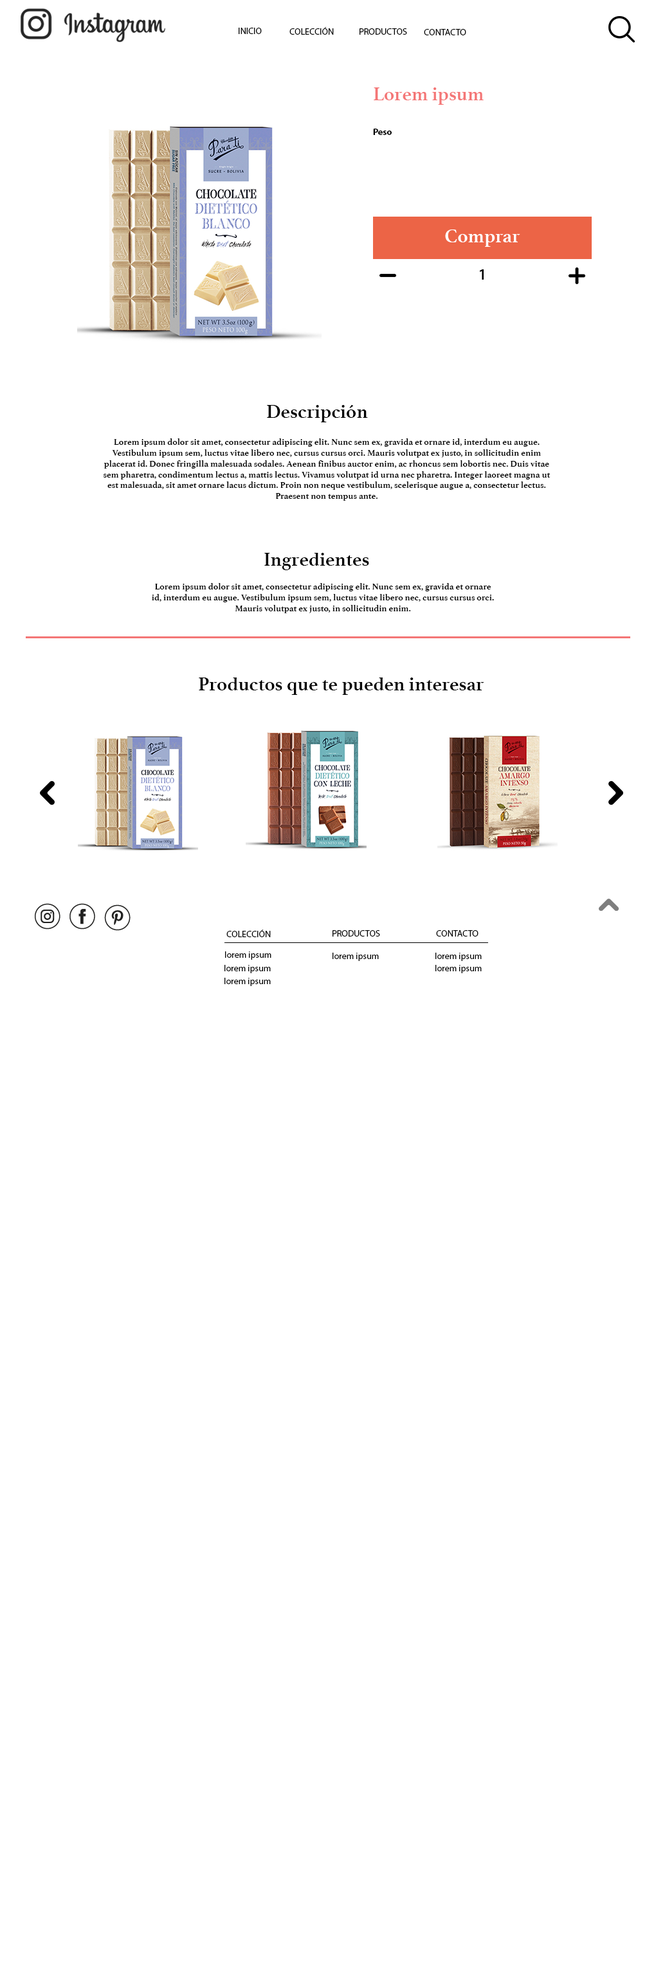
<style>
.page{position:relative;width:656px;height:1967px;background:#ffffff}
.page>*{position:absolute;margin:0}
.t1{font:9px "MyriadPro-Regular";color:#000000}
.t2{font:19.3px "Athelas-Bold";color:#f47676}
.t3{font:9px "MyriadPro-Bold";color:#000000}
.t4{font:19.3px "Athelas-Bold";color:#ffffff}
.t5{font:15.4px "MyriadPro-Semibold";color:#000000}
.t6{font:19.3px "Athelas-Bold";color:#000000}
.t7{font:9px "Athelas-Bold";color:#000000}
</style>
<div class="page">
<p class="t1" style="left:239px;top:28px;width:23px;height:6px">INICIO</p>
<p class="t1" style="left:289px;top:27px;width:45px;height:8px">COLECCIÓN</p>
<p class="t1" style="left:359px;top:28px;width:48px;height:7px">PRODUCTOS</p>
<p class="t1" style="left:424px;top:29px;width:42px;height:6px">CONTACTO</p>
<p class="t2" style="left:374px;top:87px;width:109px;height:18px">Lorem ipsum</p>
<p class="t3" style="left:373px;top:129px;width:19px;height:6px">Peso</p>
<p class="t4" style="left:445px;top:230px;width:75px;height:17px">Comprar</p>
<p class="t5" style="left:479px;top:269px;width:4px;height:11px">1</p>
<p class="t6" style="left:267px;top:405px;width:101px;height:17px">Descripción</p>
<p class="t7" style="left:104px;top:438px;width:446px;height:63px;text-align:center">Lorem ipsum dolor sit amet, consectetur adipiscing elit. Nunc sem ex, gravida et ornare id, interdum eu augue. Vestibulum ipsum sem, luctus vitae libero nec, cursus cursus orci. Mauris volutpat ex justo, in sollicitudin enim placerat id. Donec fringilla malesuada sodales. Aenean finibus auctor enim, ac rhoncus sem lobortis nec. Duis vitae sem pharetra, condimentum lectus a, mattis lectus. Vivamus volutpat id urna nec pharetra. Integer laoreet magna ut est malesuada, sit amet ornare lacus dictum. Proin non neque vestibulum, scelerisque augue a, consectetur lectus. Praesent non tempus ante.</p>
<p class="t6" style="left:264px;top:553px;width:105px;height:17px">Ingredientes</p>
<p class="t7" style="left:152px;top:583px;width:342px;height:30px;text-align:center">Lorem ipsum dolor sit amet, consectetur adipiscing elit. Nunc sem ex, gravida et ornare id, interdum eu augue. Vestibulum ipsum sem, luctus vitae libero nec, cursus cursus orci. Mauris volutpat ex justo, in sollicitudin enim.</p>
<p class="t6" style="left:199px;top:678px;width:285px;height:17px">Productos que te pueden interesar</p>
<p class="t1" style="left:226px;top:930px;width:45px;height:7px">COLECCIÓN</p>
<p class="t1" style="left:332px;top:930px;width:48px;height:7px">PRODUCTOS</p>
<p class="t1" style="left:436px;top:930px;width:42px;height:7px">CONTACTO</p>
<p class="t1" style="left:225px;top:951px;width:46px;height:9px">lorem ipsum</p>
<p class="t1" style="left:332px;top:953px;width:47px;height:8px">lorem ipsum</p>
<p class="t1" style="left:435px;top:953px;width:47px;height:8px">lorem ipsum</p>
<p class="t1" style="left:224px;top:965px;width:47px;height:8px">lorem ipsum</p>
<p class="t1" style="left:435px;top:965px;width:47px;height:8px">lorem ipsum</p>
<p class="t1" style="left:224px;top:978px;width:47px;height:8px">lorem ipsum</p>
</div>
